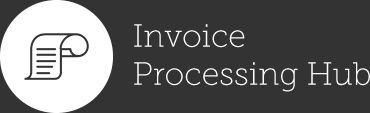
<style>
.page{position:relative;width:370px;height:113px;background:#333333}
.page>*{position:absolute;margin:0}
.t1{font:32px/38px "MuseoSlab-100";color:#ffffff}
</style>
<div class="page">
<p class="t1" style="left:134px;top:24px;width:236px;height:68px">Invoice <br>Processing Hub</p>
</div>
